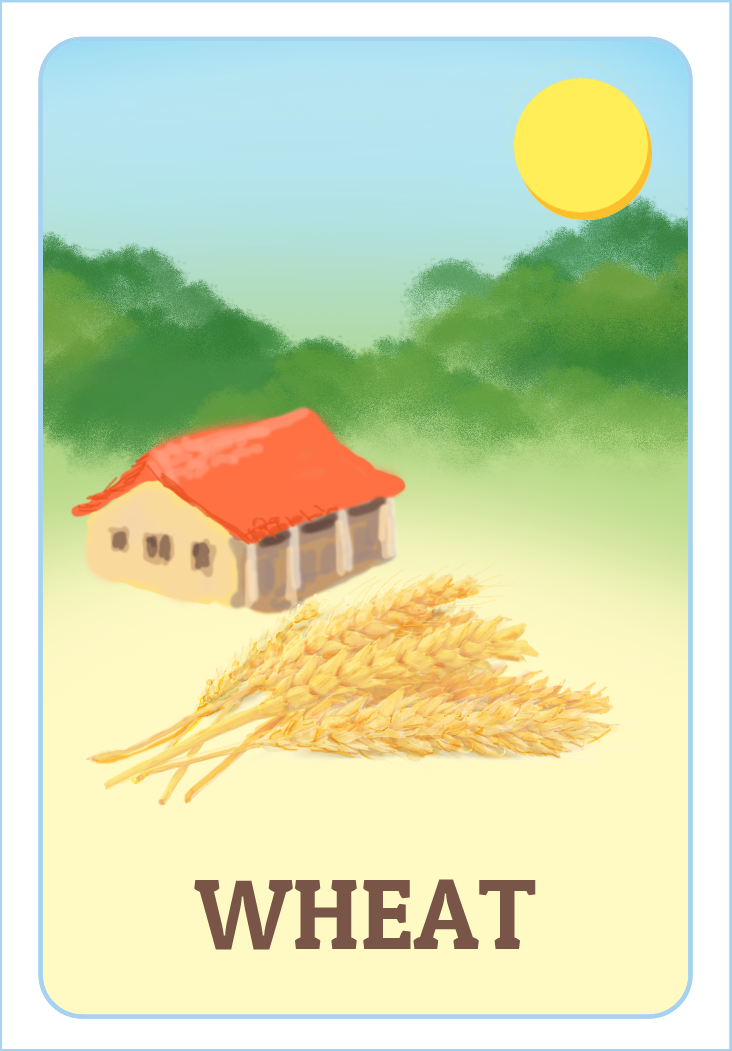
<style>
.page{position:relative;width:732px;height:1051px;background:#fff9c4}
.page>*{position:absolute;margin:0}
.t1{font:100px "PatuaOne-Regular";color:#795548}
</style>
<div class="page">
<p class="t1" style="left:194px;top:879px;width:342px;height:71px">WHEAT</p>
</div>
